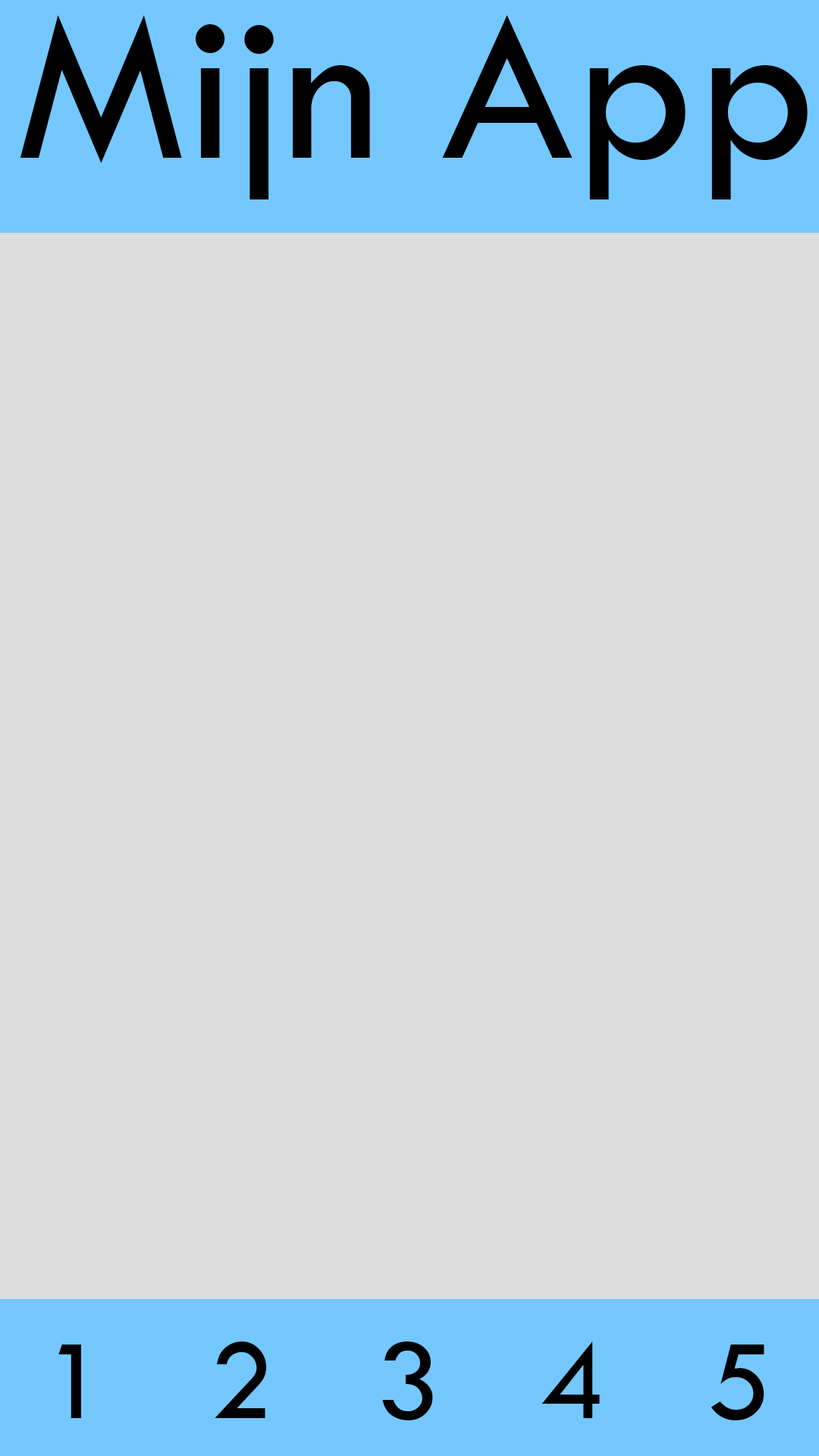
<style>
.page{position:relative;width:819px;height:1456px;background:#dddddd}
.page>*{position:absolute;margin:0}
.t1{font:221.5px "TwCenMT-Regular";color:#000000}
.t2{font:118.1px "TwCenMT-Regular";color:#000000}
</style>
<div class="page">
<p class="t1" style="left:20px;top:15px;width:788px;height:184px">Mijn App</p>
<p class="t2" style="left:58px;top:1341px;width:706px;height:79px">1   2   3    4   5</p>
</div>
